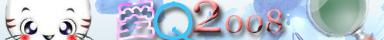
<style>
.page{position:relative;width:384px;height:40px}
.page>*{position:absolute;margin:0}
.t1{font:38.2px "STCaiyun";font-weight:bold;scale:1.06 1}
.t2{font:32.7px "Georgia"}
.t3{font:59.9px "Georgia"}
</style>
<div class="page">
<p class="t1" style="left:116px;top:0px;width:39px;height:40px;rotate:-6deg">爱</p>
<p class="t2" style="left:193px;top:0px;width:90px;height:33px"><span class="t3">2</span>008</p>
</div>
